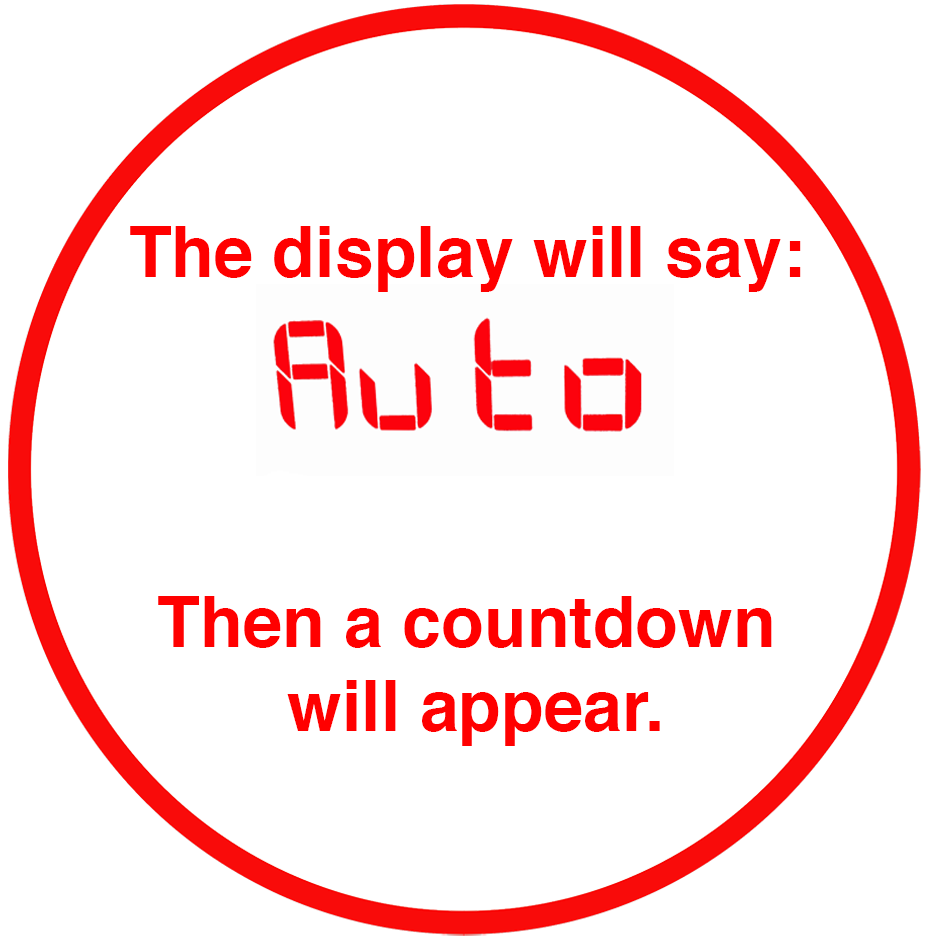
<style>
.page{position:relative;width:930px;height:940px;background:#ffffff}
.page>*{position:absolute;margin:0}
.t1{font:70px "Helvetica-Bold";color:#ff0000}
</style>
<div class="page">
<p class="t1" style="left:130px;top:226px;width:671px;height:66px">The display will say:</p>
<p class="t1" style="left:158px;top:596px;width:614px;height:150px;text-align:center">Then a countdown <br>will appear.</p>
</div>
